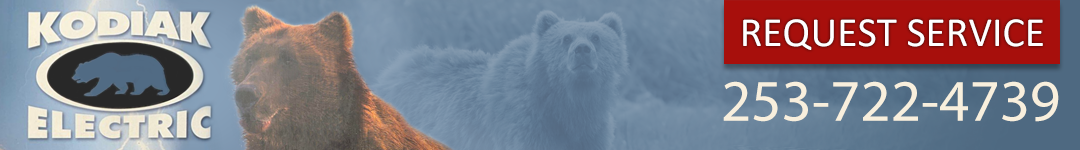
<style>
.page{position:relative;width:1080px;height:150px}
.page>*{position:absolute;margin:0}
.t1{font:41.6px "Calibri";color:#fffeff}
.t2{font:59.1px "MyriadPro-Regular";color:#f8efdd}
</style>
<div class="page">
<p class="t1" style="left:743px;top:19px;width:300px;height:31px">REQUEST SERVICE</p>
<p class="t2" style="left:723px;top:81px;width:336px;height:41px">253-722-4739</p>
</div>
